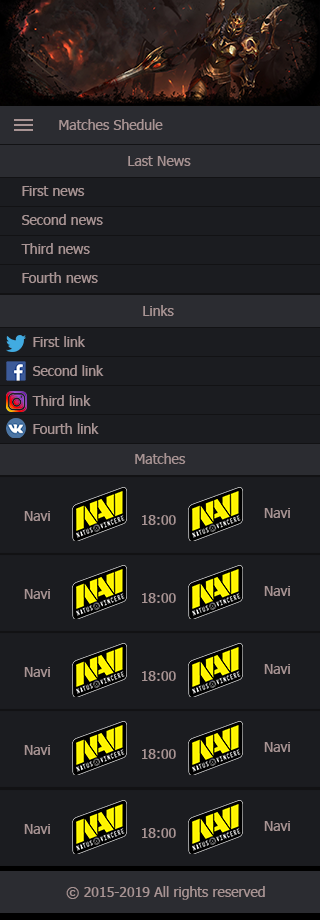
<style>
.page{position:relative;width:320px;height:920px;background:#1b1c20}
.page>*{position:absolute;margin:0}
.t1{font:14px "Tahoma";color:#a89494}
</style>
<div class="page">
<p class="t1" style="left:59px;top:119px;width:104px;height:11px">Matches Shedule</p>
<p class="t1" style="left:128px;top:156px;width:63px;height:10px">Last News</p>
<p class="t1" style="left:22px;top:186px;width:63px;height:10px">First news</p>
<p class="t1" style="left:22px;top:214px;width:81px;height:11px">Second news</p>
<p class="t1" style="left:21px;top:243px;width:69px;height:11px">Third news</p>
<p class="t1" style="left:22px;top:272px;width:76px;height:11px">Fourth news</p>
<p class="t1" style="left:143px;top:305px;width:31px;height:11px">Links</p>
<p class="t1" style="left:33px;top:336px;width:52px;height:11px">First link</p>
<p class="t1" style="left:33px;top:365px;width:71px;height:11px">Second link</p>
<p class="t1" style="left:32px;top:395px;width:59px;height:11px">Third link</p>
<p class="t1" style="left:33px;top:423px;width:66px;height:11px">Fourth link</p>
<p class="t1" style="left:135px;top:453px;width:51px;height:11px">Matches</p>
<p class="t1" style="left:264px;top:508px;width:26px;height:10px">Navi</p>
<p class="t1" style="left:24px;top:511px;width:26px;height:10px">Navi</p>
<p class="t1" style="left:142px;top:515px;width:34px;height:10px">18:00</p>
<p class="t1" style="left:24px;top:589px;width:26px;height:10px">Navi</p>
<p class="t1" style="left:142px;top:593px;width:34px;height:10px">18:00</p>
<p class="t1" style="left:264px;top:586px;width:26px;height:10px">Navi</p>
<p class="t1" style="left:264px;top:664px;width:26px;height:10px">Navi</p>
<p class="t1" style="left:24px;top:667px;width:26px;height:10px">Navi</p>
<p class="t1" style="left:142px;top:671px;width:34px;height:10px">18:00</p>
<p class="t1" style="left:24px;top:745px;width:26px;height:10px">Navi</p>
<p class="t1" style="left:142px;top:749px;width:34px;height:10px">18:00</p>
<p class="t1" style="left:264px;top:742px;width:26px;height:10px">Navi</p>
<p class="t1" style="left:264px;top:821px;width:26px;height:10px">Navi</p>
<p class="t1" style="left:24px;top:824px;width:26px;height:10px">Navi</p>
<p class="t1" style="left:142px;top:828px;width:34px;height:10px">18:00</p>
<p class="t1" style="left:66px;top:886px;width:199px;height:14px">© 2015-2019 All rights reserved</p>
</div>
